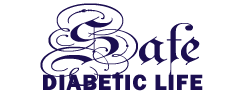
<style>
.page{position:relative;width:250px;height:100px;background:#ffffff}
.page>*{position:absolute;margin:0}
.t1{font:23px/28px "FranklinGothic-Heavy";letter-spacing:0.04em;color:#1b0e51}
.t2{font:86.9px/10px "Parchment-Regular";color:#1b0e51;font-weight:bold;scale:1.44 1}
.t3{font:96.4px/15px "Parchment-Regular";letter-spacing:-0.02em;color:#1b0e51;scale:1.44 1}
</style>
<div class="page">
<p class="t1" style="left:40px;top:3px;width:163px;height:88px;text-align:center"><span class="t2">  </span><span class="t3">Safe<br>     </span>DIABETIC LIFE</p>
</div>
